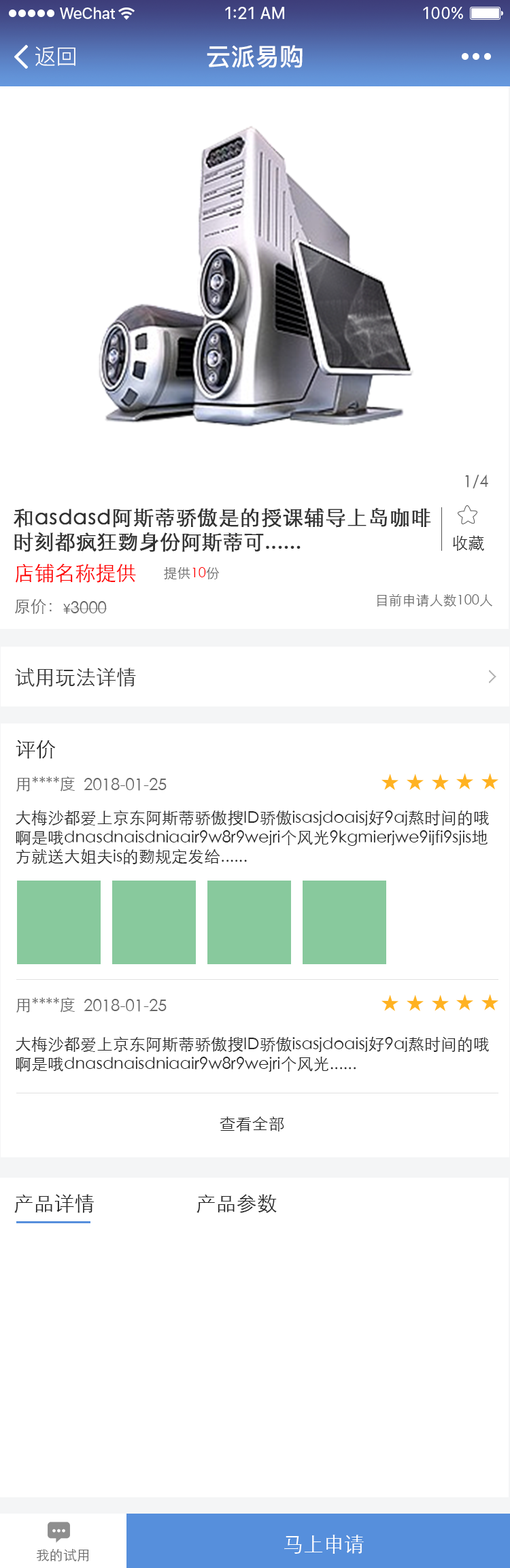
<style>
.page{position:relative;width:510px;height:1568px;background:#ffffff}
.page>*{position:absolute;margin:0}
.t1{font:21.8px "PingFang-SC-Regular";color:#ffffff}
.t2{font:24.5px "PingFang-SC-Bold";color:#ffffff}
.t3{font:16.3px "STXihei";color:#666666}
.t4{font:20.4px "STXihei";color:#333333;font-weight:bold}
.t5{font:16.3px "STXihei";color:#262626}
.t6{font:20.4px "STXihei";color:#ff0000}
.t7{font:13.6px "STXihei";color:#666666}
.t8{font:13.6px "STXihei";color:#ff0000}
.t9{font:20.4px "STXihei";color:#333333}
.t10{font:20.4px "STXihei";color:#262626}
.t11{font:20.4px "STXihei";color:#ffffff}
</style>
<div class="page">
<p class="t1" style="left:35px;top:46px;width:40px;height:20px">返回</p>
<p class="t2" style="left:207px;top:45px;width:96px;height:23px">云派易购</p>
<p class="t3" style="left:465px;top:475px;width:23px;height:14px">1/4</p>
<p class="t4" style="left:14px;top:508px;width:417px;height:44px;text-align:justify">和asdasd阿斯蒂骄傲是的授课辅导上岛咖啡时刻都疯狂覅身份阿斯蒂可......</p>
<p class="t5" style="left:453px;top:535px;width:31px;height:16px">收藏</p>
<p class="t6" style="left:15px;top:564px;width:121px;height:19px">店铺名称提供</p>
<p class="t7" style="left:164px;top:567px;width:56px;height:13px">提供<span class="t8">10</span>份</p>
<p class="t7" style="left:377px;top:594px;width:115px;height:13px">目前申请人数100人</p>
<p class="t3" style="left:15px;top:599px;width:37px;height:15px">原价：</p>
<p class="t3" style="left:63px;top:601px;width:44px;height:13px"><span class="t7">¥</span>3000</p>
<p class="t9" style="left:15px;top:668px;width:121px;height:19px">试用玩法详情</p>
<p class="t10" style="left:16px;top:740px;width:40px;height:19px">评价</p>
<p class="t3" style="left:16px;top:777px;width:59px;height:14px">用****度</p>
<p class="t3" style="left:84px;top:778px;width:83px;height:13px">2018-01-25</p>
<p class="t5" style="left:16px;top:810px;width:473px;height:54px">大梅沙都爱上京东阿斯蒂骄傲搜ID骄傲isasjdoaisj好9aj熬时间的哦啊是哦dnasdnaisdniaair9w8r9wejri个风光9kgmierjwe9ijfi9sjis地方就送大姐夫is的覅规定发给......</p>
<p class="t3" style="left:16px;top:998px;width:59px;height:14px">用****度</p>
<p class="t3" style="left:84px;top:999px;width:83px;height:13px">2018-01-25</p>
<p class="t5" style="left:16px;top:1036px;width:473px;height:36px">大梅沙都爱上京东阿斯蒂骄傲搜ID骄傲isasjdoaisj好9aj熬时间的哦啊是哦dnasdnaisdniaair9w8r9wejri个风光......</p>
<p class="t5" style="left:220px;top:1117px;width:64px;height:14px">查看全部</p>
<p class="t10" style="left:14px;top:1194px;width:80px;height:19px">产品详情</p>
<p class="t10" style="left:197px;top:1194px;width:80px;height:19px">产品参数</p>
<p class="t11" style="left:284px;top:1535px;width:80px;height:19px">马上申请</p>
<p class="t7" style="left:37px;top:1549px;width:52px;height:13px">我的试用</p>
</div>
